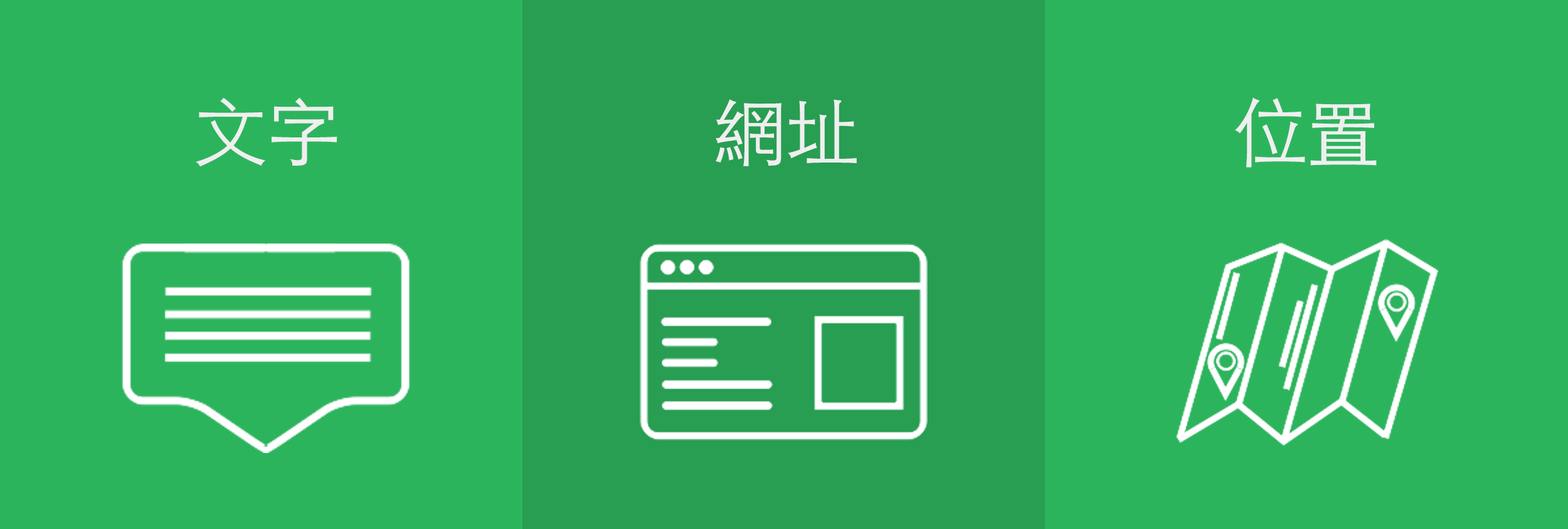
<style>
.page{position:relative;width:1568px;height:529px;background:#2cb45d}
.page>*{position:absolute;margin:0}
.t1{font:74.7px "STHeitiTC-Light";letter-spacing:-0.015em;color:#efefef}
</style>
<div class="page">
<p class="t1" style="left:196px;top:97px;width:141px;height:70px">文字</p>
<p class="t1" style="left:716px;top:99px;width:141px;height:67px">網址</p>
<p class="t1" style="left:1235px;top:97px;width:142px;height:70px">位置</p>
</div>
